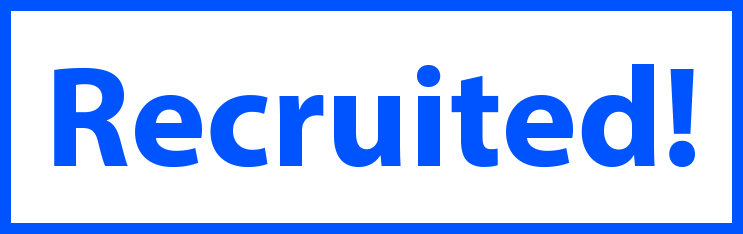
<style>
.page{position:relative;width:743px;height:234px;background:#ffffff}
.page>*{position:absolute;margin:0}
.t1{font:144px "MyriadPro-Bold";color:#0054ff}
</style>
<div class="page">
<p class="t1" style="left:54px;top:64px;width:641px;height:104px">Recruited!</p>
</div>
